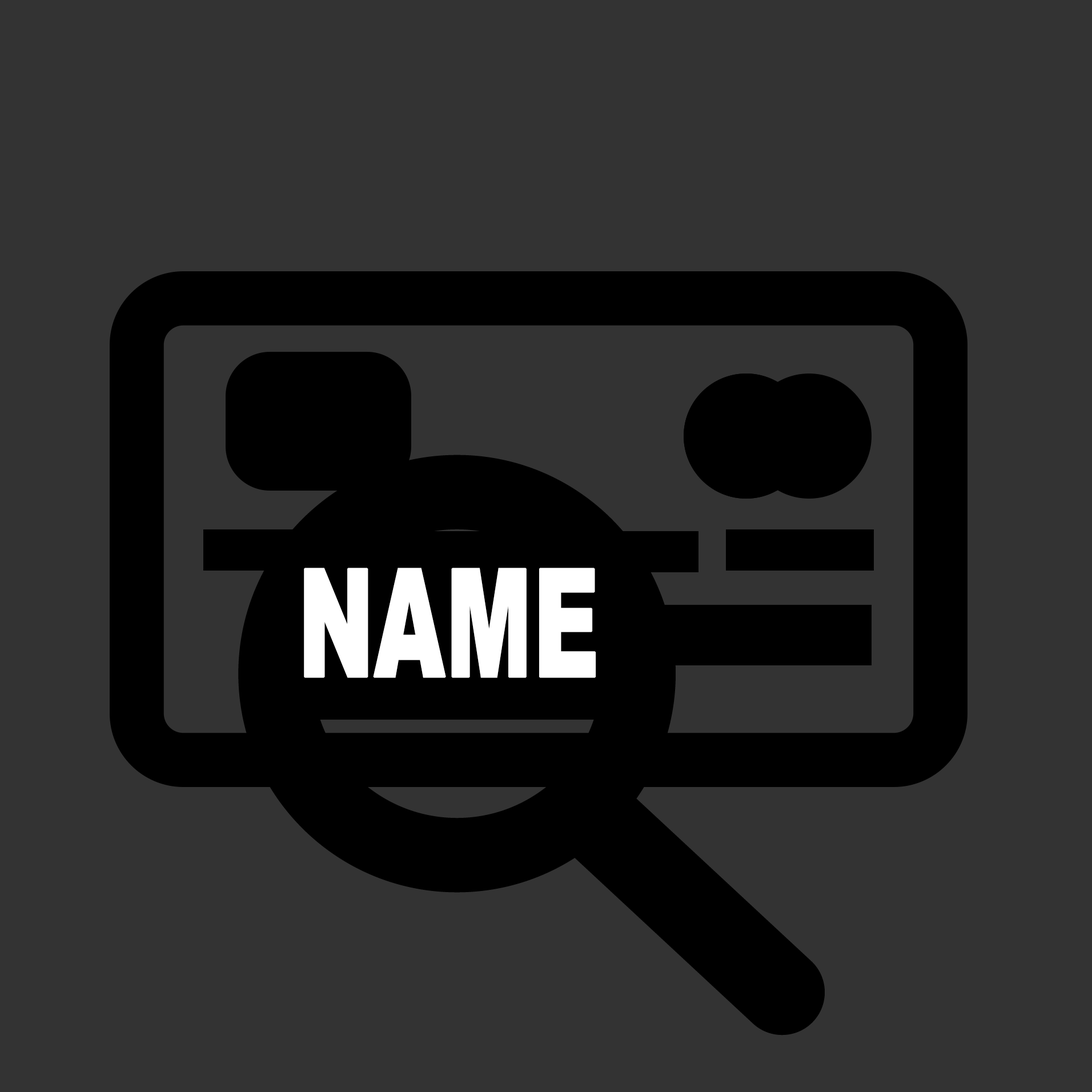
<style>
.page{position:relative;width:1092px;height:1092px;background:#333333}
.page>*{position:absolute;margin:0}
.t1{font:150.9px "Arial-Black";letter-spacing:-0.01em;color:#ffffff;text-transform:uppercase;font-weight:bold;scale:0.6 1}
</style>
<div class="page">
<p class="t1" style="left:304px;top:568px;width:292px;height:110px">NAME</p>
</div>
